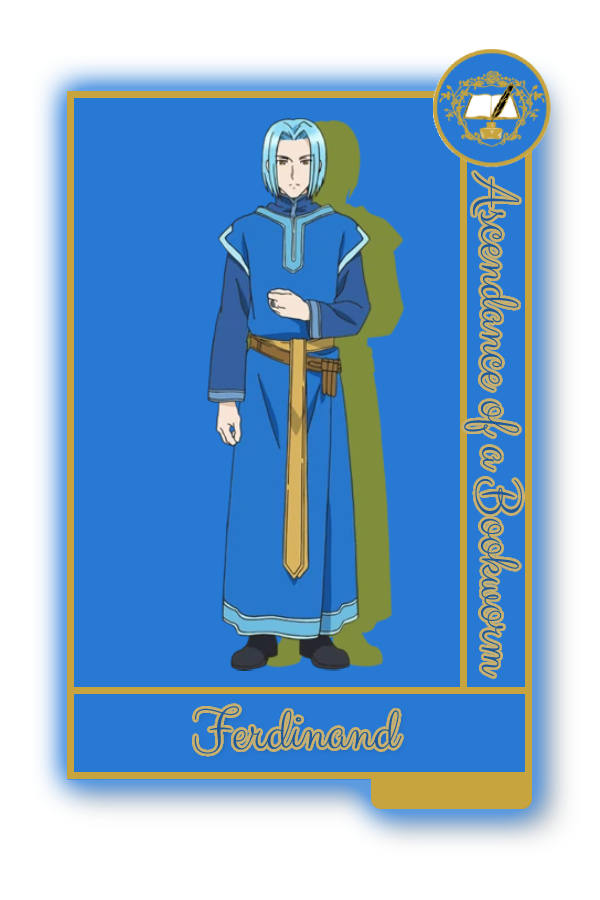
<style>
.page{position:relative;width:600px;height:900px;background:#2879d4}
.page>*{position:absolute;margin:0}
.t1{font:58px "ClickerScript-Regular";color:#1d599c}
.t2{font:60px "ClickerScript-Regular";color:#1d599c}
</style>
<div class="page">
<p class="t1" style="left:464px;top:172px;width:59px;height:505px;rotate:90deg">Ascendance of a Bookworm</p>
<p class="t2" style="left:194px;top:706px;width:208px;height:48px">Ferdinand</p>
</div>
